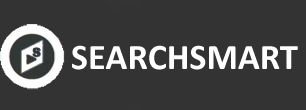
<style>
.page{position:relative;width:306px;height:110px;background:#333333}
.page>*{position:absolute;margin:0}
.t1{font:36px "Calibri-Bold";color:#ffffff}
</style>
<div class="page">
<p class="t1" style="left:72px;top:45px;width:226px;height:25px">SEARCHSMART</p>
</div>
